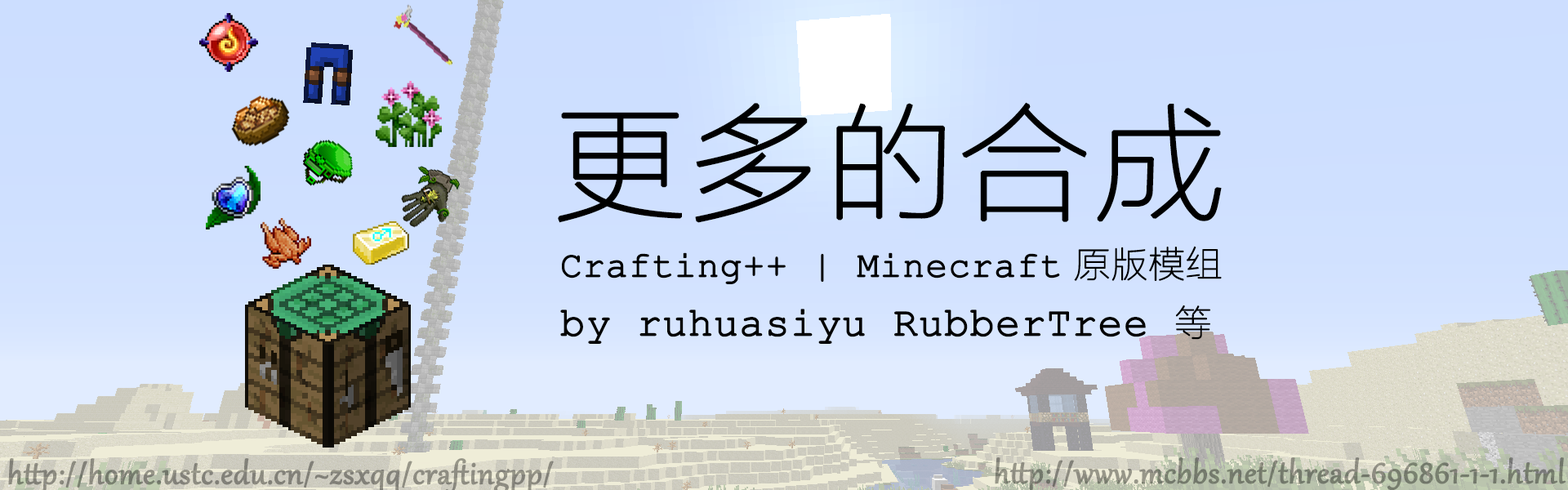
<style>
.page{position:relative;width:1568px;height:490px}
.page>*{position:absolute;margin:0}
.t1{font:127.2px "FZLTCXHJW--GB1-0";color:#000000;font-weight:bold;scale:1.03 1}
.t2{font:36.4px "CourierNewPSMT";color:#000000;font-weight:bold}
.t3{font:36.4px "FZLTCXHJW--GB1-0";color:#000000;font-weight:bold}
.t4{font:40.8px "CourierNewPSMT";color:#000000;font-weight:bold}
</style>
<div class="page">
<p class="t1" style="left:558px;top:102px;width:664px;height:121px">更多的合成</p>
<p class="t2" style="left:562px;top:246px;width:660px;height:38px">Crafting++ | Minecraft<span class="t3"> 原版模组</span></p>
<p class="t4" style="left:560px;top:305px;width:650px;height:39px">by ruhuasiyu RubberTree <span class="t3">等</span></p>
</div>
